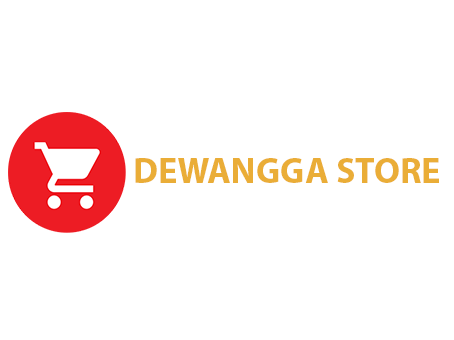
<style>
.page{position:relative;width:454px;height:340px;background:#ffffff}
.page>*{position:absolute;margin:0}
.t1{font:36px "MyriadHebrew-Bold";color:#eaad37}
</style>
<div class="page">
<p class="t1" style="left:135px;top:158px;width:304px;height:25px">DEWANGGA STORE</p>
</div>
